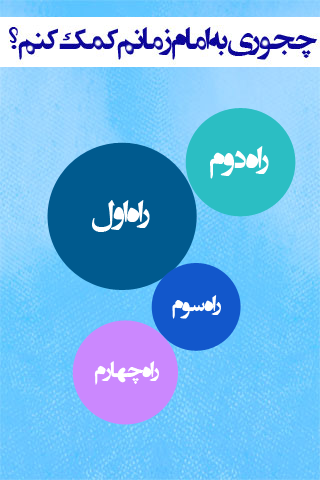
<style>
.page{position:relative;width:320px;height:480px}
.page>*{position:absolute;margin:0}
.t1{font:34.7px "EntezareZohoor1";color:#ffffff}
.t2{font:25px "EntezareZohoor1";color:#ffffff}
</style>
<div class="page">
<p class="t1" style="left:210px;top:146px;width:59px;height:33px">راه دوم</p>
<p class="t1" style="left:92px;top:200px;width:58px;height:32px">راه اول</p>
<p class="t2" style="left:172px;top:295px;width:49px;height:24px">راه سوم</p>
<p class="t2" style="left:94px;top:361px;width:65px;height:24px">راه چهارم</p>
</div>
